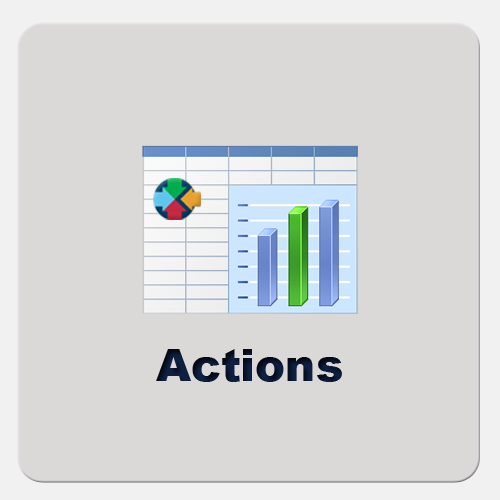
<style>
.page{position:relative;width:500px;height:500px;background:#dbd8d8}
.page>*{position:absolute;margin:0}
.t1{font:45px "Arial-Black";color:#0a1831}
</style>
<div class="page">
<p class="t1" style="left:156px;top:349px;width:186px;height:33px">Actions</p>
</div>
